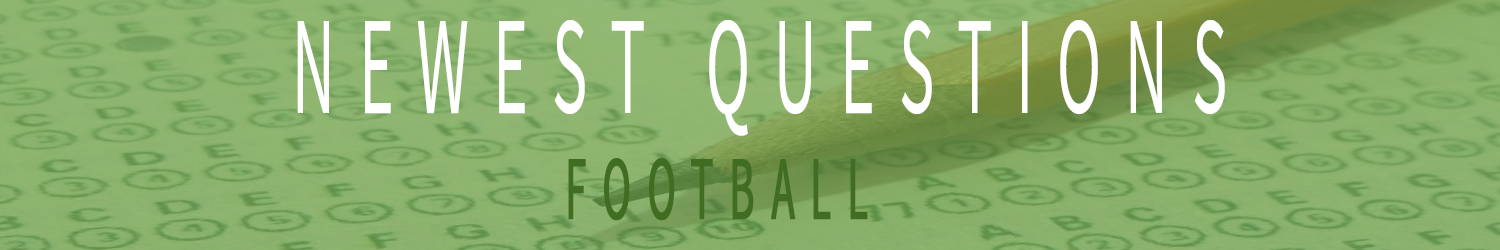
<style>
.page{position:relative;width:1500px;height:250px}
.page>*{position:absolute;margin:0}
.t1{font:139.5px "SourceSansPro-Regular";letter-spacing:0.36em;color:#ffffff;scale:0.48 1}
.t2{font:89.3px "SourceSansPro-Regular";letter-spacing:0.36em;color:#416d23;font-weight:bold;scale:0.48 1}
</style>
<div class="page">
<p class="t1" style="left:297px;top:20px;width:928px;height:116px">NEWEST QUESTIONS</p>
<p class="t2" style="left:568px;top:158px;width:300px;height:63px">FOOTBALL</p>
</div>
